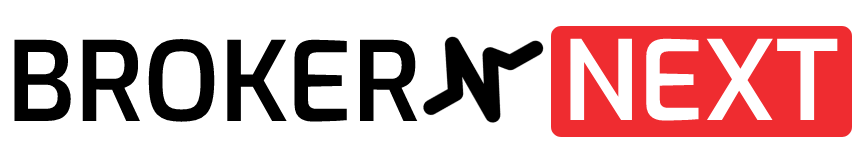
<style>
.page{position:relative;width:860px;height:160px;background:#ffffff}
.page>*{position:absolute;margin:0}
.t1{font:110px "Exo-SemiBold";color:#000000}
.t2{font:110px "Exo-SemiBold";color:#ffffff}
</style>
<div class="page">
<p class="t1" style="left:14px;top:39px;width:404px;height:83px">BROKER</p>
<p class="t2" style="left:570px;top:38px;width:268px;height:83px">NEXT</p>
</div>
